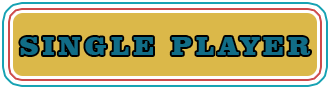
<style>
.page{position:relative;width:330px;height:89px;background:#dbb849}
.page>*{position:absolute;margin:0}
.t1{font:27px "ClarendonBT-Black";letter-spacing:0.15em;color:#116d87;text-transform:uppercase}
</style>
<div class="page">
<p class="t1" style="left:20px;top:37px;width:290px;height:18px">Single Player</p>
</div>
